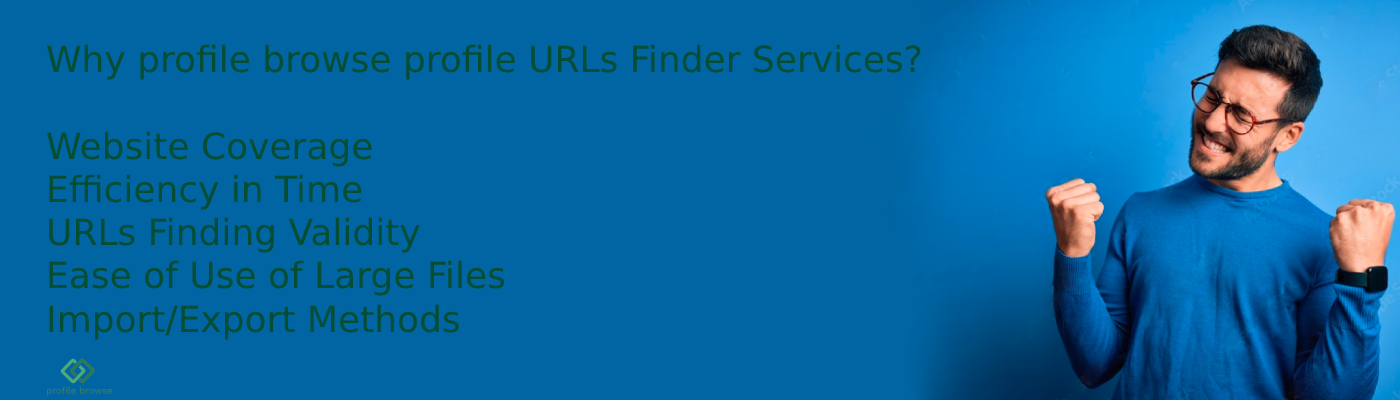
<style>
.page{position:relative;width:1400px;height:400px;background:#0065a2}
.page>*{position:absolute;margin:0}
.t1{font:36px "DejaVuSans";color:#054e33}
</style>
<div class="page">
<p class="t1" style="left:47px;top:44px;width:874px;height:296px">Why profile browse profile URLs Finder Services?<br><br>Website Coverage<br>Efficiency in Time<br>URLs Finding Validity<br>Ease of Use of Large Files<br>Import/Export Methods</p>
</div>
